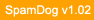
<style>
.page{position:relative;width:94px;height:20px;background:#fea203}
.page>*{position:absolute;margin:0}
.t1{font:12px "ArialMT";color:#fefefe}
</style>
<div class="page">
<p class="t1" style="left:5px;top:5px;width:86px;height:12px">SpamDog v1.02</p>
</div>
